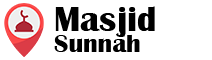
<style>
.page{position:relative;width:212px;height:60px;background:#ffffff}
.page>*{position:absolute;margin:0}
.t1{font:36px "BritannicBold";color:#000000}
.t2{font:26px "BritannicBold";color:#000000}
</style>
<div class="page">
<p class="t1" style="left:55px;top:6px;width:100px;height:31px">Masjid</p>
<p class="t2" style="left:54px;top:34px;width:86px;height:18px">Sunnah</p>
</div>
